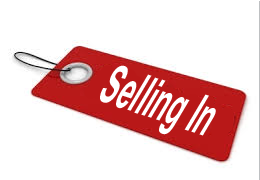
<style>
.page{position:relative;width:260px;height:180px;background:#ffffff}
.page>*{position:absolute;margin:0}
.t1{font:57px "Arial-BoldMT";color:#ffffff;scale:0.45 1}
</style>
<div class="page">
<p class="t1" style="left:100px;top:65px;width:116px;height:71px;rotate:19deg">Selling In</p>
</div>
